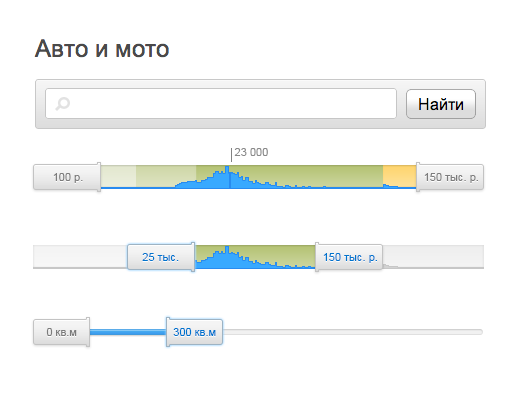
<style>
.page{position:relative;width:514px;height:404px;background:#ffffff}
.page>*{position:absolute;margin:0}
.t1{font:11px "ArialMT";color:#898989}
.t2{font:11px "ArialMT";color:#7c7c7c}
.t3{font:11px "ArialMT";color:#0074cd}
</style>
<div class="page">
<p class="t1" style="left:234px;top:148px;width:34px;height:8px">23 000</p>
<p class="t2" style="left:53px;top:173px;width:30px;height:10px">100 р.</p>
<p class="t2" style="left:424px;top:173px;width:54px;height:10px">150 тыс. р.</p>
<p class="t3" style="left:142px;top:253px;width:37px;height:8px">25 тыс.</p>
<p class="t3" style="left:323px;top:253px;width:54px;height:10px">150 тыс. р.</p>
<p class="t2" style="left:46px;top:328px;width:31px;height:8px">0 кв.м</p>
<p class="t3" style="left:173px;top:328px;width:43px;height:8px">300 кв.м</p>
</div>
